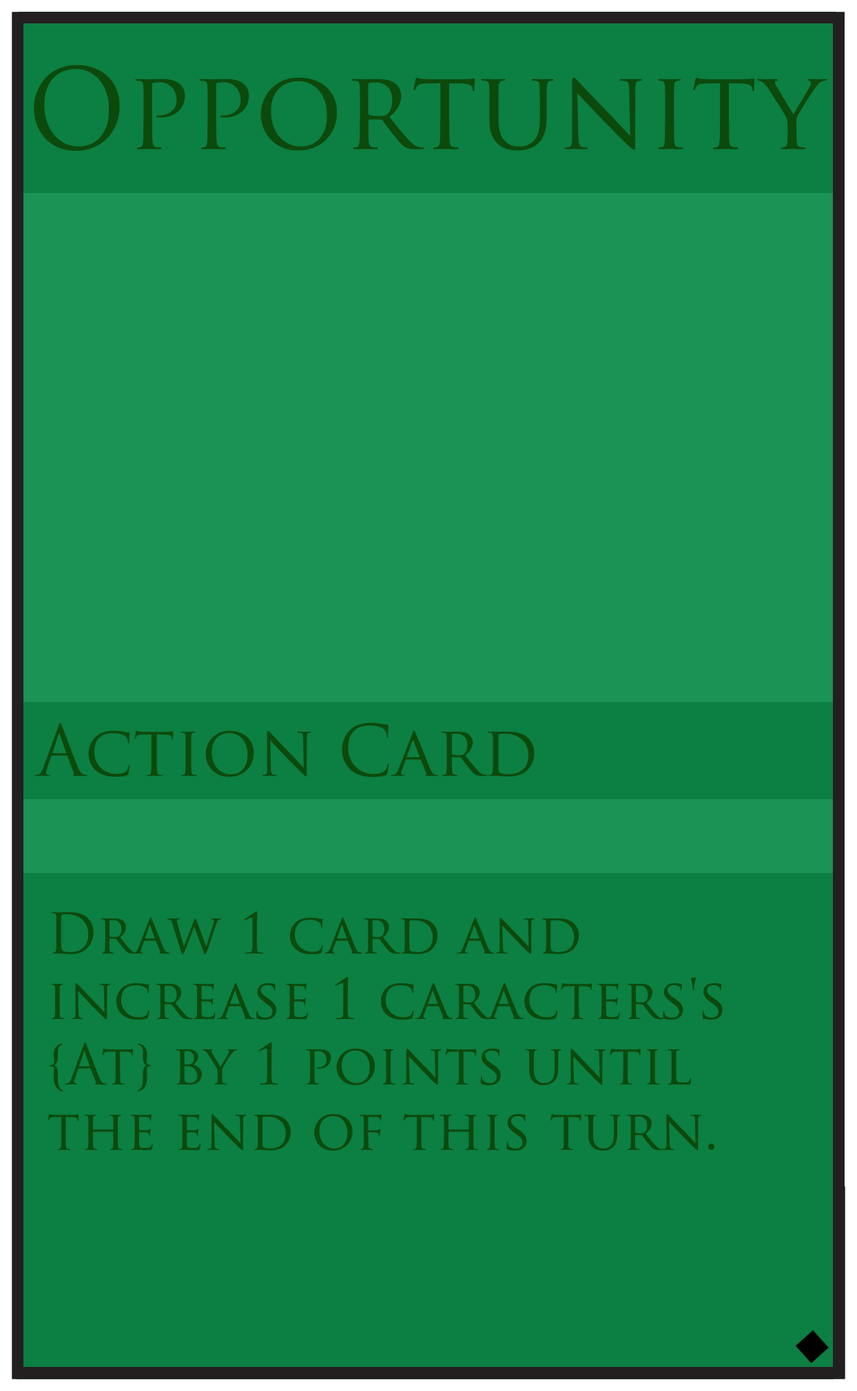
<style>
.page{position:relative;width:857px;height:1391px;background:#0c7f42}
.page>*{position:absolute;margin:0}
.t1{font:109.1px "TrajanPro-Regular";color:#0c4a0c}
.t2{font:68.9px "TrajanPro-Regular";color:#0c4a0c}
.t3{font:54.5px "TrajanPro-Regular";color:#0c4a0c}
</style>
<div class="page">
<p class="t1" style="left:34px;top:65px;width:793px;height:86px">Opportunity</p>
<p class="t2" style="left:34px;top:723px;width:501px;height:54px">Action Card</p>
<p class="t3" style="left:48px;top:912px;width:675px;height:239px">Draw 1 card and <br>increase 1 caracters's <br>{At} by 1 points until <br>the end of this turn.</p>
</div>
